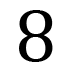
<style>
.page{position:relative;width:72px;height:72px;background:#ffffff}
.page>*{position:absolute;margin:0}
.t1{font:75px "CambriaMath";color:#000000}
</style>
<div class="page">
<p class="t1" style="left:19px;top:10px;width:34px;height:52px">8</p>
</div>
